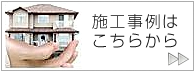
<style>
.page{position:relative;width:195px;height:72px;background:#ffffff}
.page>*{position:absolute;margin:0}
.t1{font:16px "ShinGoPro-Light";letter-spacing:0.1em;color:#141414}
.t2{font:16px "ShinGoPro-Light";letter-spacing:0.54em;color:#141414}
</style>
<div class="page">
<p class="t1" style="left:92px;top:14px;width:86px;height:34px">施工事例は<br>こちらか<span class="t2">ら</span></p>
</div>
